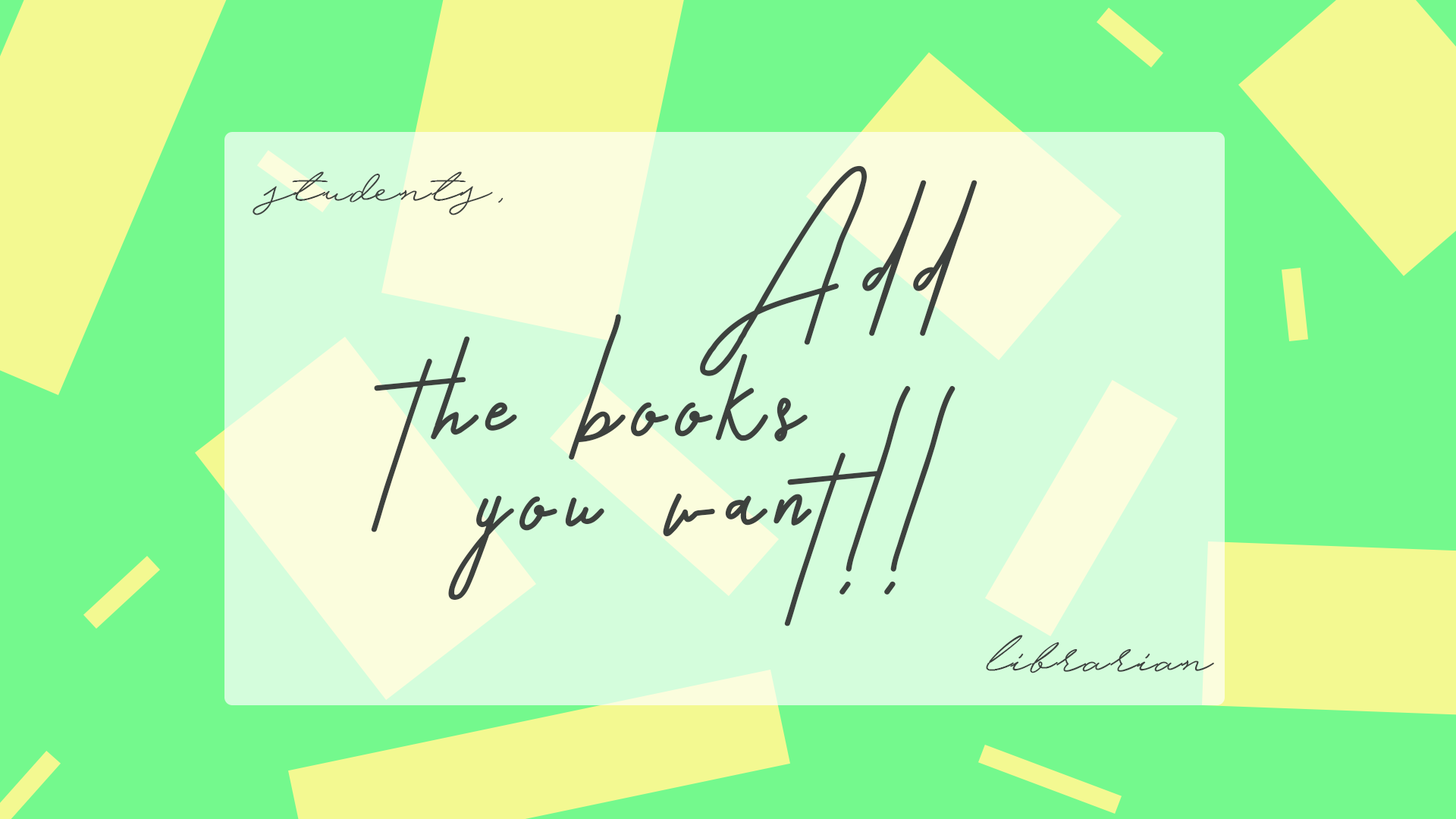
<style>
.page{position:relative;width:1456px;height:819px;background:#74f98d}
.page>*{position:absolute;margin:0}
.t1{font:56.9px "HijrnotesPERSONALUSEONLY";letter-spacing:0.05em;color:#3d413e}
.t2{font:273px "Astronout";letter-spacing:0.05em;color:#3d413e}
</style>
<div class="page">
<p class="t1" style="left:253px;top:171px;width:251px;height:44px">students,</p>
<p class="t2" style="left:700px;top:165px;width:277px;height:211px">Add</p>
<p class="t2" style="left:371px;top:314px;width:437px;height:218px">the books</p>
<p class="t2" style="left:448px;top:386px;width:507px;height:240px">you want!!</p>
<p class="t1" style="left:986px;top:635px;width:228px;height:38px">librarian</p>
</div>
